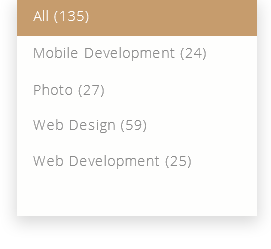
<style>
.page{position:relative;width:271px;height:249px;background:#fefefd}
.page>*{position:absolute;margin:0}
.t1{font:14px "OpenSans-Light";letter-spacing:0.05em;color:#ffffff}
.t2{font:14px "OpenSans-Light";letter-spacing:0.05em;color:#8c8c8c}
</style>
<div class="page">
<p class="t1" style="left:33px;top:10px;width:56px;height:13px">All (135)</p>
<p class="t2" style="left:34px;top:47px;width:172px;height:14px">Mobile Development (24)</p>
<p class="t2" style="left:34px;top:84px;width:70px;height:13px">Photo (27)</p>
<p class="t2" style="left:33px;top:119px;width:113px;height:14px">Web Design (59)</p>
<p class="t2" style="left:33px;top:155px;width:158px;height:14px">Web Development (25)</p>
</div>
